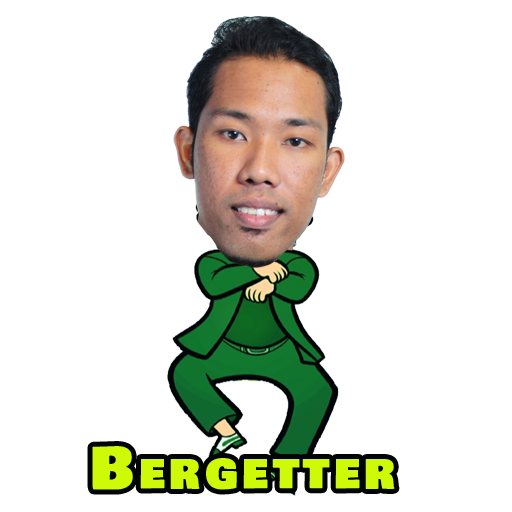
<style>
.page{position:relative;width:512px;height:512px;background:#ffffff}
.page>*{position:absolute;margin:0}
.t1{font:56.8px "BowlbyOneSC-Regular";letter-spacing:0.08em;color:#cef907;font-variant:small-caps;font-weight:bold}
</style>
<div class="page">
<p class="t1" style="left:92px;top:446px;width:303px;height:44px">Bergetter</p>
</div>
